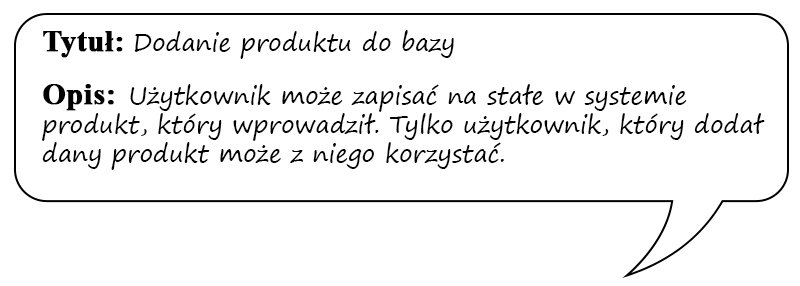
<style>
.page{position:relative;width:800px;height:286px;background:#ffffff}
.page>*{position:absolute;margin:0}
.t1{font:24px "SegoePrint";color:#000000}
.t2{font:30px "TimesNewRomanPS-BoldMT";color:#000000;font-weight:bold}
</style>
<div class="page">
<p class="t1" style="left:42px;top:30px;width:723px;height:140px"><span class="t2">Tytuł: </span>Dodanie produktu do bazy<br><br><span class="t2">Opis:  </span>Użytkownik może zapisać na stałe w systemie produkt, który wprowadził. Tylko użytkownik, który dodał dany produkt może z niego korzystać.</p>
</div>
